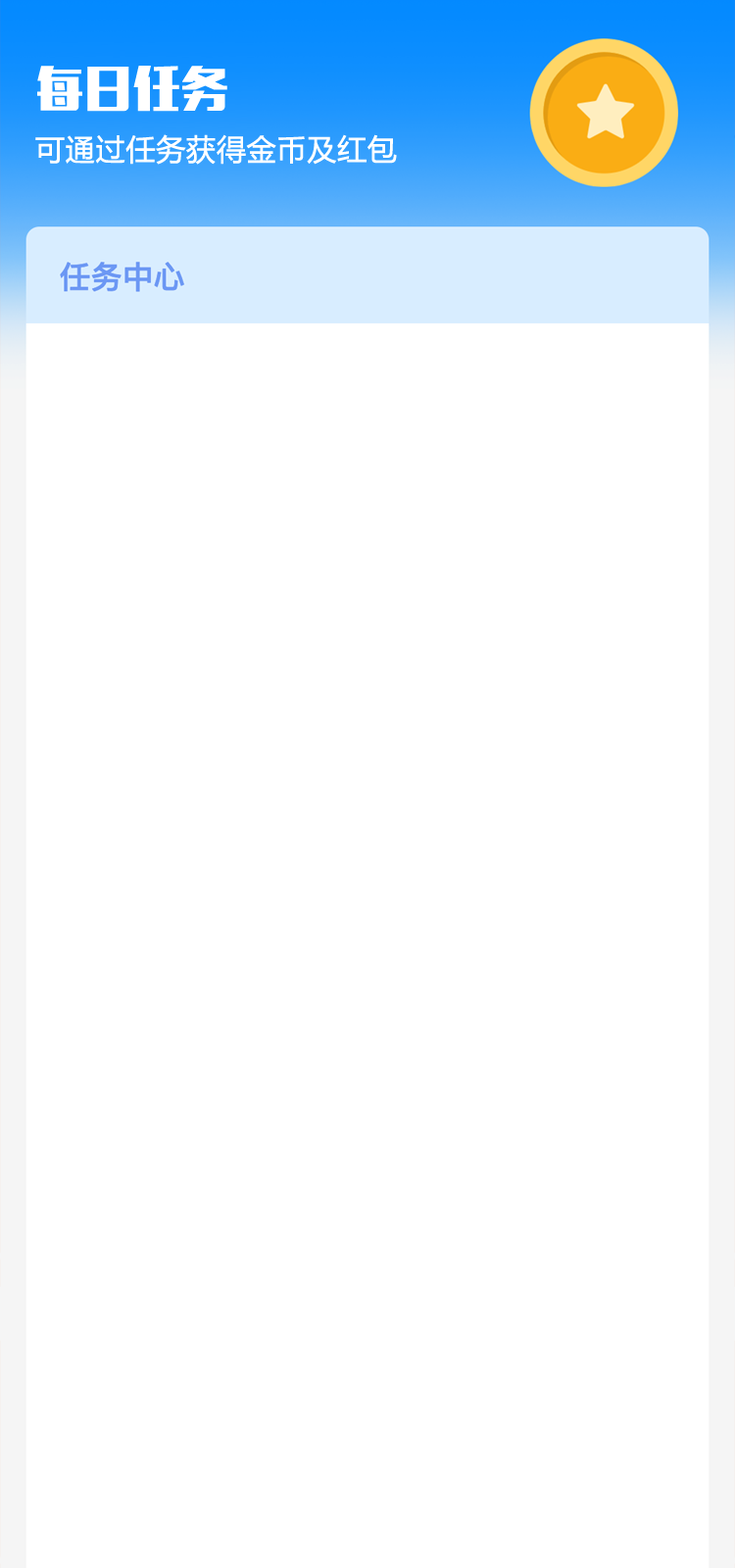
<style>
.page{position:relative;width:735px;height:1568px;background:#ffffff}
.page>*{position:absolute;margin:0}
.t1{font:47px "MFLiHei_Noncommercial-Regular";color:#ffffff;font-variant:small-caps;font-weight:bold}
.t2{font:29.4px "MicrosoftYaHei";color:#ffffff;font-variant:small-caps;font-weight:bold}
</style>
<div class="page">
<p class="t1" style="left:37px;top:66px;width:190px;height:46px">每日任务</p>
<p class="t2" style="left:35px;top:134px;width:362px;height:31px">可通过任务获得金币及红包</p>
</div>
